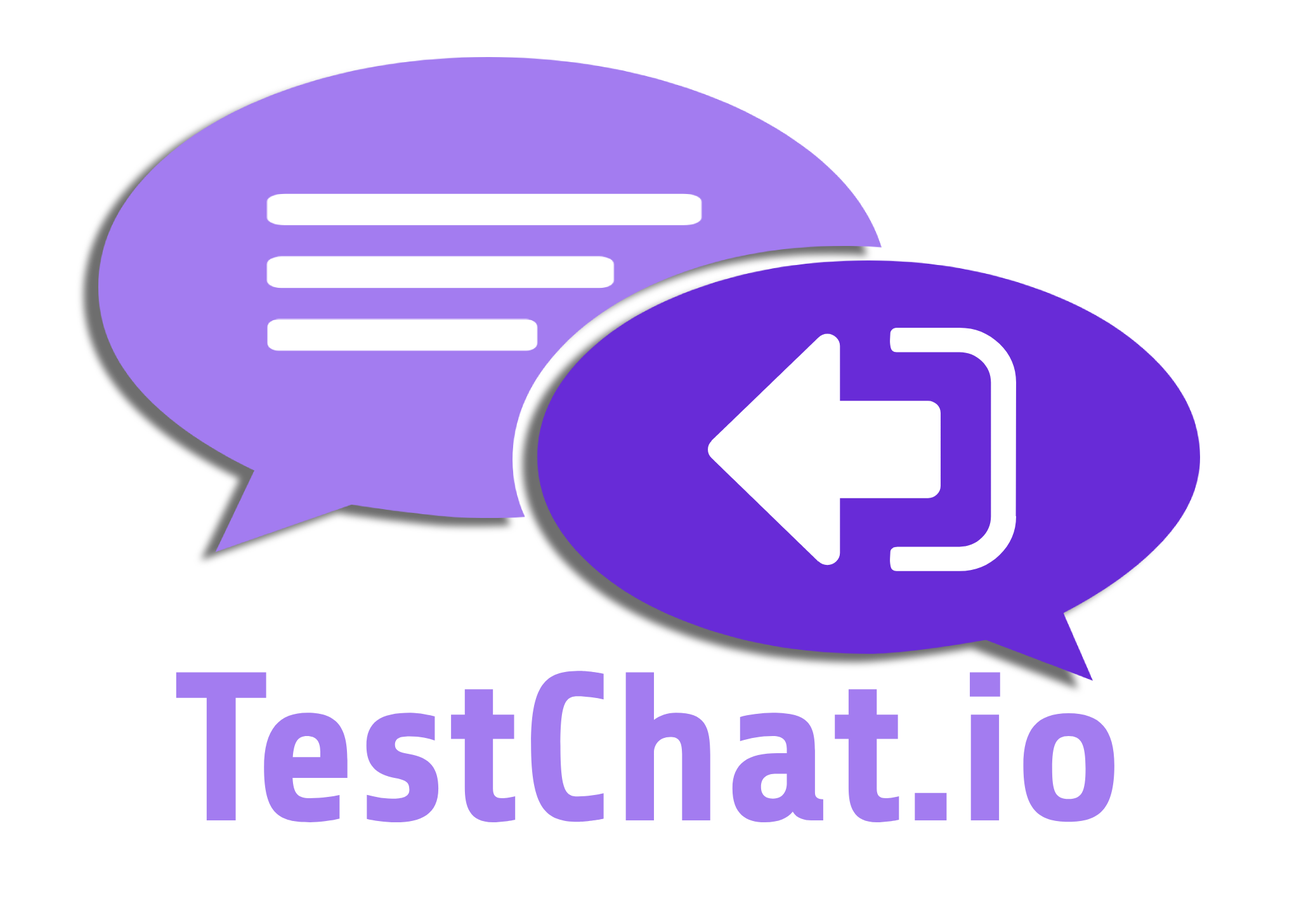
<style>
.page{position:relative;width:1299px;height:918px;background:#ffffff}
.page>*{position:absolute;margin:0}
.t1{font:211.5px "Share-BoldOSF";color:#a37cf0}
</style>
<div class="page">
<p class="t1" style="left:176px;top:671px;width:938px;height:152px">TestChat.io</p>
</div>
